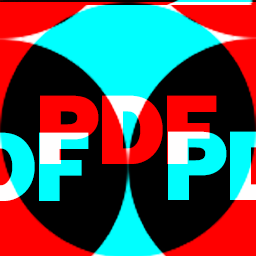
<style>
.page{position:relative;width:256px;height:256px;background:#000000}
.page>*{position:absolute;margin:0}
.t1{font:102.4px "FranklinGothic-Heavy";letter-spacing:-0.04em}
</style>
<div class="page">
<p class="t1" style="left:40px;top:93px;width:177px;height:69px">PDF</p>
</div>
